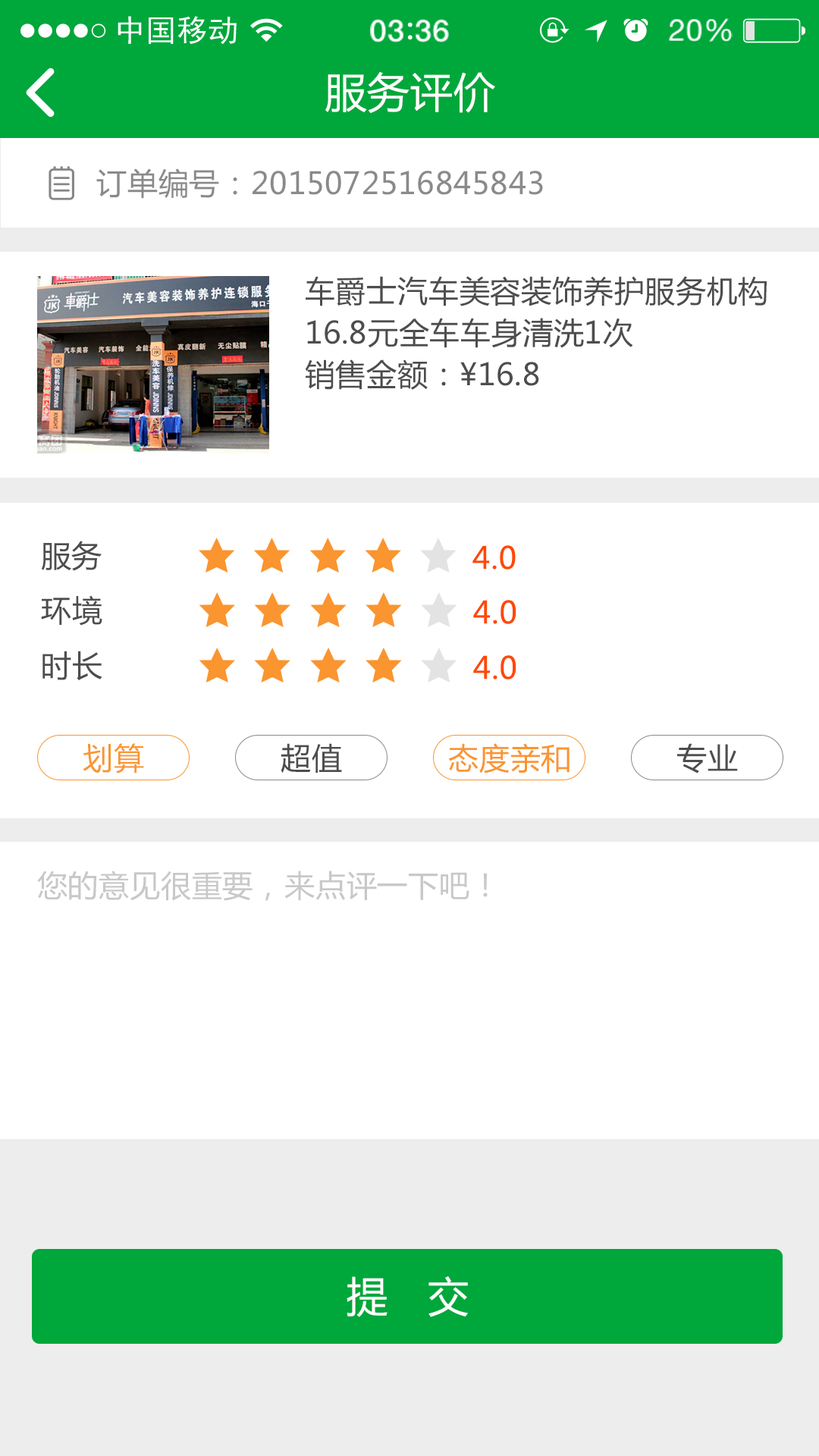
<style>
.page{position:relative;width:819px;height:1456px;background:#ffffff}
.page>*{position:absolute;margin:0}
.t1{font:41.7px "MicrosoftYaHei";letter-spacing:0.02em;color:#ffffff}
.t2{font:30.3px "MicrosoftYaHei";letter-spacing:0.02em;color:#8a8a8a}
.t3{font:30.3px/41.7px "MicrosoftYaHei";letter-spacing:0.02em;color:#4d4d4d}
.t4{font:30.3px "MicrosoftYaHei";letter-spacing:0.02em;color:#4d4d4d}
.t5{font:30.3px "MicrosoftYaHei";letter-spacing:0.02em;color:#ff4800}
.t6{font:30.3px "MicrosoftYaHei";letter-spacing:0.02em;color:#fa952f}
.t7{font:30.3px "MicrosoftYaHei";letter-spacing:0.02em;color:#c8c8c8}
</style>
<div class="page">
<p class="t1" style="left:325px;top:71px;width:170px;height:42px">服务评价</p>
<p class="t2" style="left:96px;top:168px;width:447px;height:31px">订单编号：2015072516845843</p>
<p class="t3" style="left:305px;top:276px;width:462px;height:114px">车爵士汽车美容装饰养护服务机构<br>16.8元全车车身清洗1次<br>销售金额：<span class="t4">¥</span>16.8</p>
<p class="t4" style="left:41px;top:541px;width:61px;height:30px">服务</p>
<p class="t5" style="left:472px;top:545px;width:44px;height:25px">4.0</p>
<p class="t4" style="left:41px;top:595px;width:61px;height:31px">环境</p>
<p class="t5" style="left:473px;top:600px;width:43px;height:24px">4.0</p>
<p class="t4" style="left:42px;top:651px;width:60px;height:29px">时长</p>
<p class="t5" style="left:473px;top:655px;width:43px;height:24px">4.0</p>
<p class="t6" style="left:83px;top:743px;width:61px;height:30px">划算</p>
<p class="t4" style="left:281px;top:743px;width:61px;height:30px">超值</p>
<p class="t6" style="left:448px;top:743px;width:122px;height:30px">态度亲和</p>
<p class="t4" style="left:677px;top:743px;width:61px;height:30px">专业</p>
<p class="t7" style="left:37px;top:871px;width:451px;height:30px">您的意见很重要，来点评一下吧！</p>
<p class="t1" style="left:347px;top:1276px;width:121px;height:41px">提   交</p>
</div>
